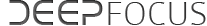
<style>
.page{position:relative;width:207px;height:26px;background:#ffffff}
.page>*{position:absolute;margin:0}
.t1{font:36px "Colaborate-Thin"}
.t2{font:36px "dayflashRegular"}
</style>
<div class="page">
<p class="t1" style="left:9px;top:0px;width:197px;height:25px"><span class="t2">DEEP</span>FOCUS</p>
</div>
